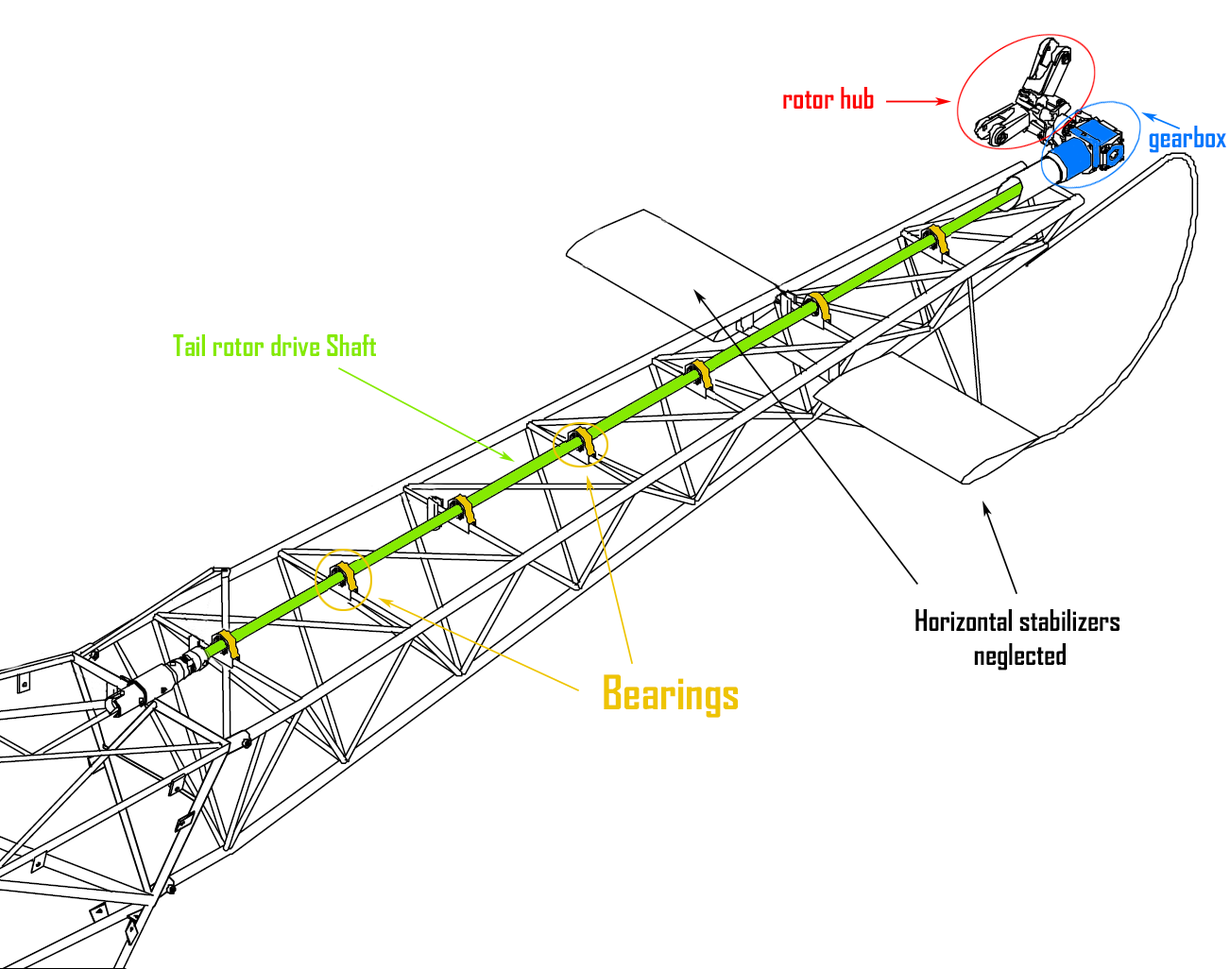
<style>
.page{position:relative;width:1230px;height:969px;background:#ffffff}
.page>*{position:absolute;margin:0}
.t1{font:28.3px "AgencyFB-Bold";color:#fd0101}
.t2{font:28.3px "AgencyFB-Bold";color:#0178fd}
.t3{font:28.3px "AgencyFB-Bold";color:#85ea02}
.t4{font:28.3px "AgencyFB-Bold";color:#000000}
.t5{font:45.4px "AgencyFB-Bold";color:#eec402}
</style>
<div class="page">
<p class="t1" style="left:783px;top:87px;width:91px;height:22px">rotor hub</p>
<p class="t2" style="left:1149px;top:126px;width:77px;height:27px">gearbox</p>
<p class="t3" style="left:173px;top:334px;width:203px;height:22px">Tail rotor drive Shaft</p>
<p class="t4" style="left:916px;top:609px;width:204px;height:62px;text-align:center">Horizontal stabilizers <br>neglected</p>
<p class="t5" style="left:604px;top:675px;width:134px;height:43px">Bearings</p>
</div>
